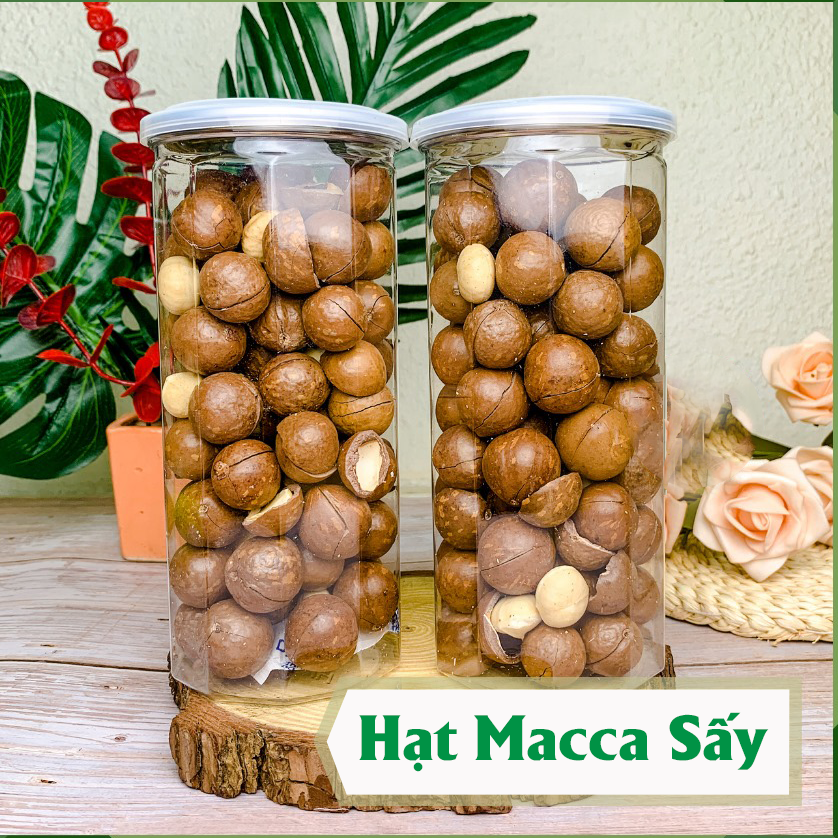
<style>
.page{position:relative;width:838px;height:838px}
.page>*{position:absolute;margin:0}
.t1{font:62px "UTM-Alberta-Heavy";color:#009245}
</style>
<div class="page">
<p class="t1" style="left:359px;top:712px;width:410px;height:60px">Hạt Macca Sấy</p>
</div>
